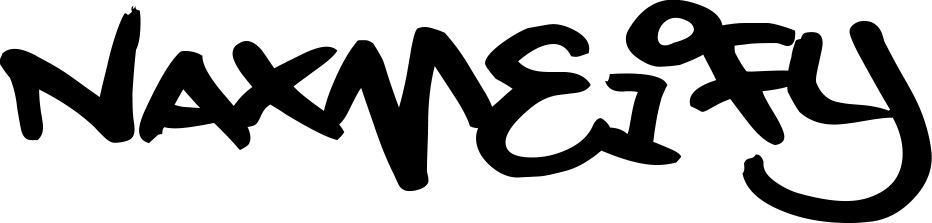
<style>
.page{position:relative;width:932px;height:223px;background:#ffffff}
.page>*{position:absolute;margin:0}
.t1{font:300px "GrandStylus";color:#000000}
</style>
<div class="page">
<p class="t1" style="left:0px;top:0px;width:932px;height:223px">Naxmeify</p>
</div>
